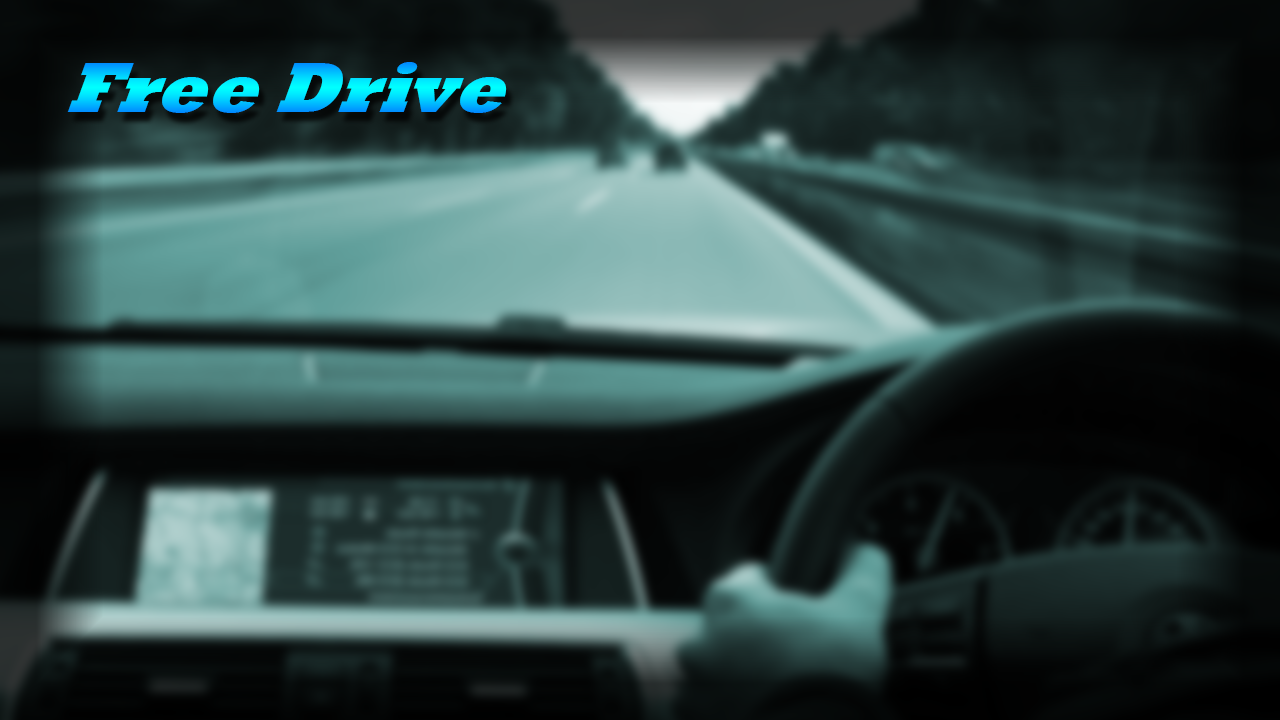
<style>
.page{position:relative;width:1280px;height:720px}
.page>*{position:absolute;margin:0}
.t1{font:76.6px "Rockwell-ExtraBold";scale:0.94 1}
</style>
<div class="page">
<p class="t1" style="left:67px;top:62px;width:440px;height:51px">Free Drive</p>
</div>
